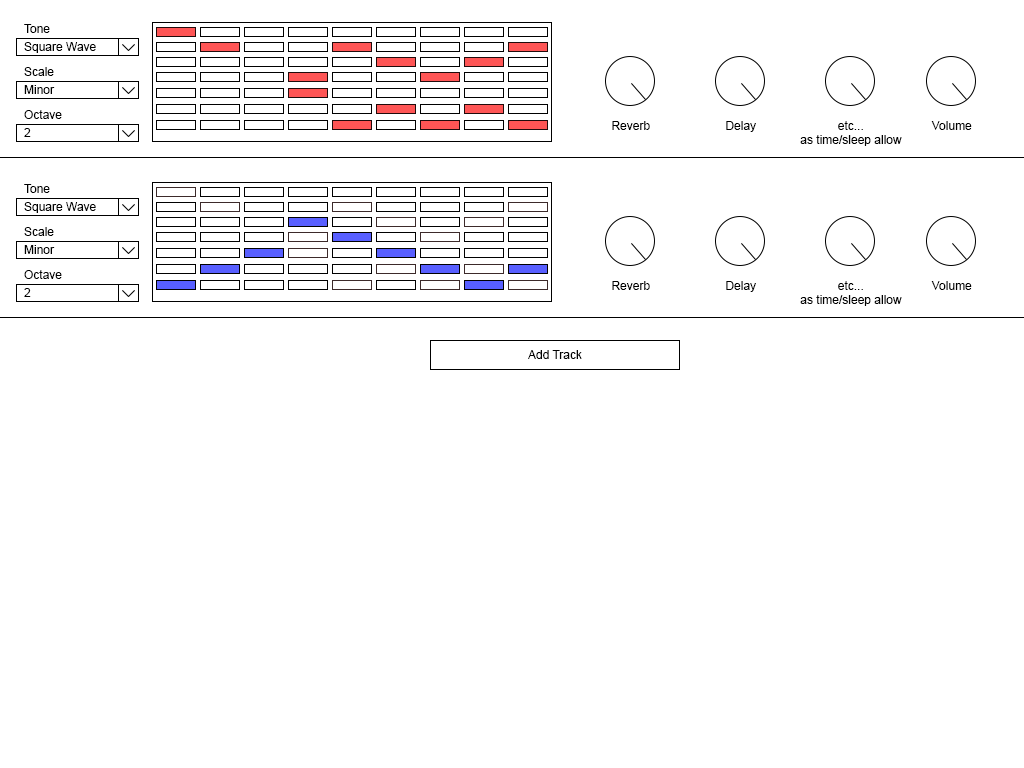
<style>
.page{position:relative;width:1024px;height:768px;background:#ffffff}
.page>*{position:absolute;margin:0}
.t1{font:12px "ArialMT";color:#000000}
</style>
<div class="page">
<p class="t1" style="left:24px;top:24px;width:26px;height:9px">Tone</p>
<p class="t1" style="left:24px;top:42px;width:72px;height:11px">Square Wave</p>
<p class="t1" style="left:24px;top:67px;width:30px;height:9px">Scale</p>
<p class="t1" style="left:24px;top:85px;width:31px;height:9px">Minor</p>
<p class="t1" style="left:24px;top:110px;width:38px;height:9px">Octave</p>
<p class="t1" style="left:612px;top:121px;width:38px;height:9px">Reverb</p>
<p class="t1" style="left:726px;top:121px;width:30px;height:11px">Delay</p>
<p class="t1" style="left:800px;top:121px;width:102px;height:25px;text-align:center">etc...<br>as time/sleep allow</p>
<p class="t1" style="left:931px;top:121px;width:41px;height:9px">Volume</p>
<p class="t1" style="left:24px;top:128px;width:7px;height:9px">2</p>
<p class="t1" style="left:24px;top:184px;width:26px;height:9px">Tone</p>
<p class="t1" style="left:24px;top:202px;width:72px;height:11px">Square Wave</p>
<p class="t1" style="left:24px;top:227px;width:30px;height:9px">Scale</p>
<p class="t1" style="left:24px;top:245px;width:31px;height:9px">Minor</p>
<p class="t1" style="left:24px;top:270px;width:38px;height:9px">Octave</p>
<p class="t1" style="left:612px;top:281px;width:38px;height:9px">Reverb</p>
<p class="t1" style="left:726px;top:281px;width:30px;height:11px">Delay</p>
<p class="t1" style="left:800px;top:281px;width:102px;height:25px;text-align:center">etc...<br>as time/sleep allow</p>
<p class="t1" style="left:931px;top:281px;width:41px;height:9px">Volume</p>
<p class="t1" style="left:24px;top:288px;width:7px;height:9px">2</p>
<p class="t1" style="left:528px;top:350px;width:54px;height:9px">Add Track</p>
</div>
